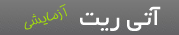
<style>
.page{position:relative;width:179px;height:35px}
.page>*{position:absolute;margin:0}
.t1{font:15px "MinaExtraLight";color:#a4df09}
.t2{font:26px "BYekan";color:#ffffff}
</style>
<div class="page">
<p class="t1" style="left:24px;top:4px;width:43px;height:26px;rotate:-15deg">آزمایشی</p>
<p class="t2" style="left:80px;top:6px;width:81px;height:25px">آتی ریت</p>
</div>
